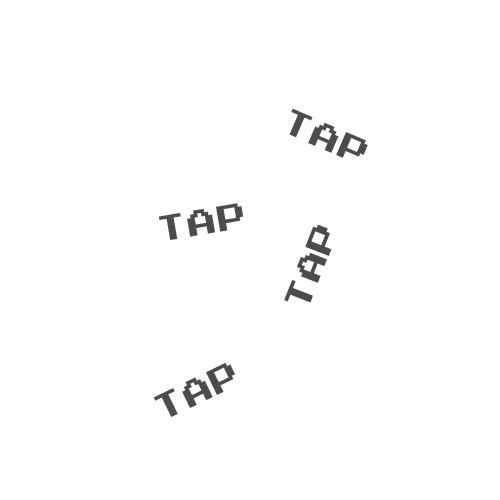
<style>
.page{position:relative;width:500px;height:500px;background:#ffffff}
.page>*{position:absolute;margin:0}
.t1{font:36px "JoystixMonospace-Regular";color:#4c4c4c}
</style>
<div class="page">
<p class="t1" style="left:289px;top:108px;width:79px;height:50px;rotate:23deg">TAP</p>
<p class="t1" style="left:158px;top:203px;width:86px;height:37px;rotate:-10deg">TAP</p>
<p class="t1" style="left:284px;top:224px;width:48px;height:79px;rotate:-69deg">TAP</p>
<p class="t1" style="left:153px;top:362px;width:82px;height:55px;rotate:-26deg">TAP</p>
</div>
